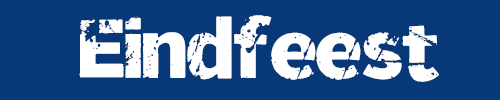
<style>
.page{position:relative;width:500px;height:100px;background:#073878}
.page>*{position:absolute;margin:0}
.t1{font:55px "321Perfect";color:#ffffff}
</style>
<div class="page">
<p class="t1" style="left:79px;top:15px;width:360px;height:67px">Eindfeest</p>
</div>
